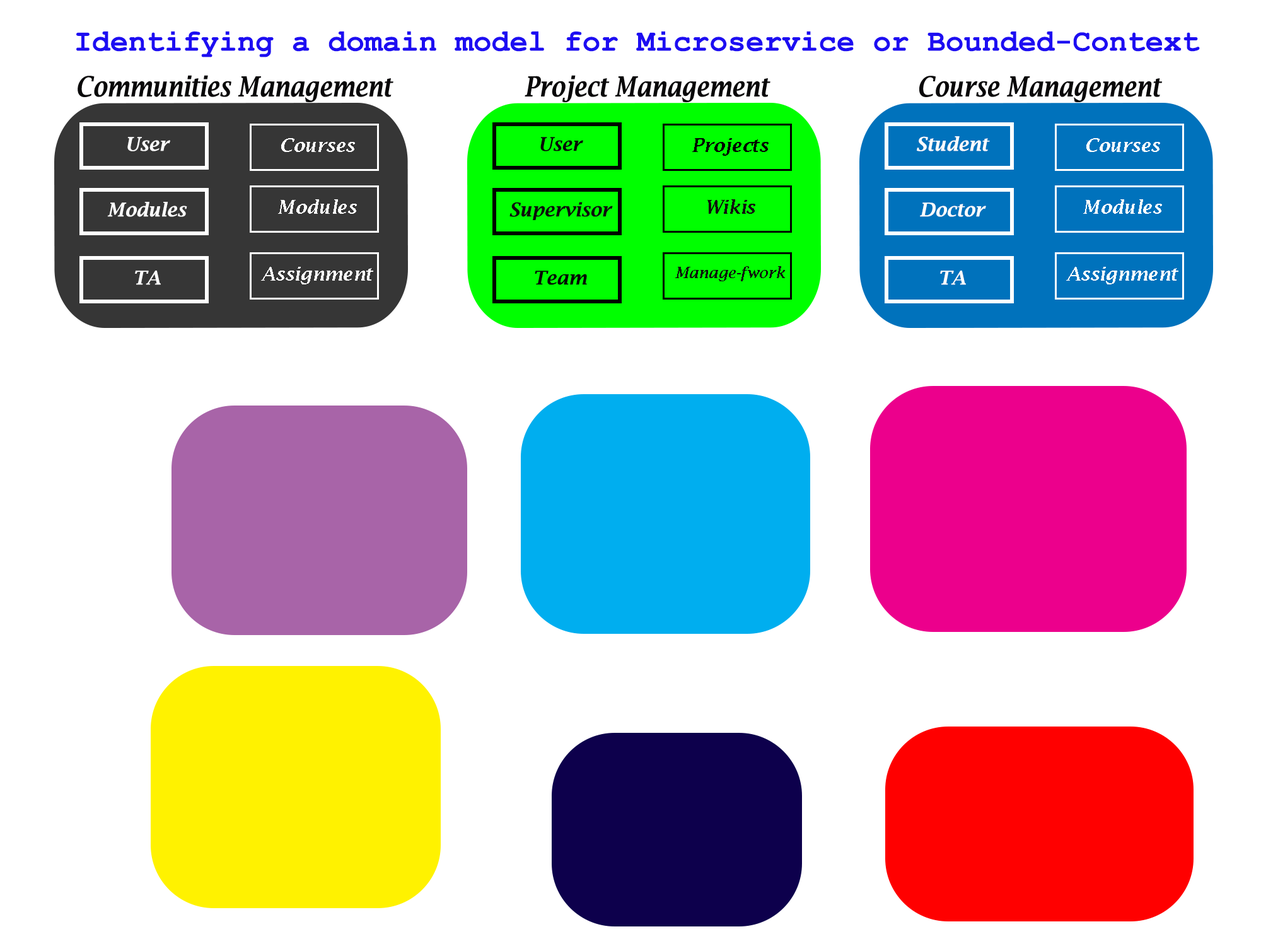
<style>
.page{position:relative;width:1261px;height:946px;background:#ffffff}
.page>*{position:absolute;margin:0}
.t1{font:30.3px "CourierNewPS-BoldMT";color:#1d0df2}
.t2{font:27.8px "LucidaBright-DemiItalic";color:#090809;scale:0.84 1}
.t3{font:18.9px "LucidaBright-DemiItalic";color:#fcfcfc}
.t4{font:18.9px "LucidaBright-DemiItalic";color:#070707}
.t5{font:18.9px "LucidaBright-DemiItalic";color:#020202}
.t6{font:18.9px "LucidaBright-DemiItalic";color:#0d0c0c}
.t7{font:18.9px "LucidaBright-DemiItalic";color:#100e0e}
.t8{font:15.1px "LucidaBright-DemiItalic";color:#0e0d0d}
.t9{font:18.9px "LucidaBright-DemiItalic";color:#060606}
</style>
<div class="page">
<p class="t1" style="left:76px;top:31px;width:1124px;height:26px">Identifying a domain model for Microservice or Bounded-Context</p>
<p class="t2" style="left:78px;top:75px;width:315px;height:28px">Communities Management</p>
<p class="t2" style="left:525px;top:75px;width:245px;height:28px">Project Management</p>
<p class="t2" style="left:919px;top:76px;width:243px;height:27px">Course Management</p>
<p class="t3" style="left:127px;top:137px;width:43px;height:14px">User</p>
<p class="t4" style="left:540px;top:137px;width:43px;height:14px">User</p>
<p class="t3" style="left:917px;top:136px;width:73px;height:15px">Student</p>
<p class="t3" style="left:281px;top:138px;width:74px;height:14px">Courses</p>
<p class="t5" style="left:692px;top:138px;width:77px;height:18px">Projects</p>
<p class="t3" style="left:1086px;top:138px;width:74px;height:14px">Courses</p>
<p class="t3" style="left:107px;top:202px;width:80px;height:15px">Modules</p>
<p class="t3" style="left:278px;top:199px;width:79px;height:15px">Modules</p>
<p class="t6" style="left:509px;top:202px;width:104px;height:18px">Supervisor</p>
<p class="t7" style="left:707px;top:199px;width:48px;height:15px">Wikis</p>
<p class="t3" style="left:920px;top:202px;width:66px;height:15px">Doctor</p>
<p class="t3" style="left:1083px;top:199px;width:79px;height:15px">Modules</p>
<p class="t3" style="left:261px;top:267px;width:112px;height:17px">Assignment</p>
<p class="t8" style="left:675px;top:266px;width:110px;height:15px">Manage-fwork</p>
<p class="t3" style="left:1066px;top:267px;width:112px;height:17px">Assignment</p>
<p class="t3" style="left:135px;top:270px;width:26px;height:15px">TA</p>
<p class="t9" style="left:535px;top:270px;width:52px;height:15px">Team</p>
<p class="t3" style="left:940px;top:270px;width:26px;height:15px">TA</p>
</div>
